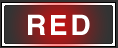
<style>
.page{position:relative;width:118px;height:48px}
.page>*{position:absolute;margin:0}
.t1{font:28px "Helvetica-Bold";letter-spacing:0.1em;color:#ffffff}
</style>
<div class="page">
<p class="t1" style="left:28px;top:14px;width:62px;height:21px">RED</p>
</div>
